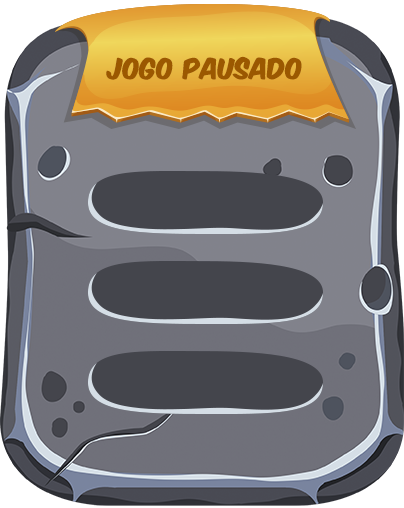
<style>
.page{position:relative;width:404px;height:508px}
.page>*{position:absolute;margin:0}
.t1{font:24.4px "KomikaAxis";letter-spacing:0.01em;color:#9b5800}
</style>
<div class="page">
<p class="t1" style="left:106px;top:56px;width:196px;height:24px">jogo pausado</p>
</div>
